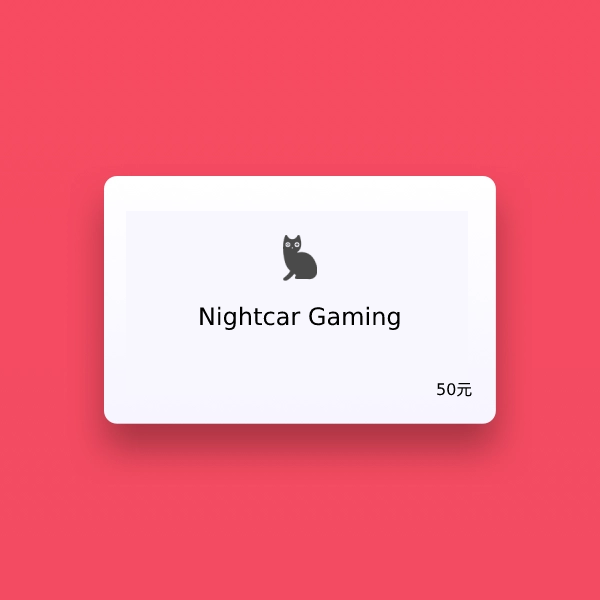
<style>
.page{position:relative;width:600px;height:600px;background:#f34b62}
.page>*{position:absolute;margin:0}
.t1{font:24px "DejaVuSans";color:#000000}
.t2{font:16px "DejaVuSans";color:#000000}
.t3{font:16px "DroidSansFallback";color:#000000}
</style>
<div class="page">
<p class="t1" style="left:200px;top:306px;width:200px;height:24px">Nightcar Gaming</p>
<p class="t2" style="left:437px;top:383px;width:35px;height:14px">50<span class="t3">元</span></p>
</div>
